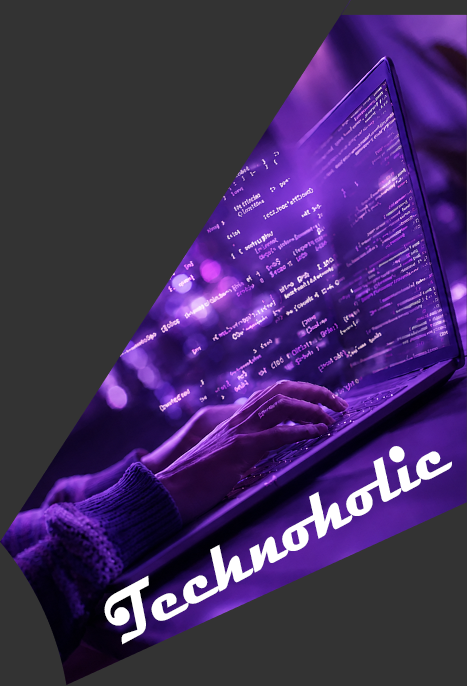
<style>
.page{position:relative;width:467px;height:686px;background:#333333}
.page>*{position:absolute;margin:0}
.t1{font:70.3px "Magneto-Bold";color:#ffffff;scale:0.83 1}
</style>
<div class="page">
<p class="t1" style="left:104px;top:446px;width:348px;height:199px;rotate:-28deg">Technoholic</p>
</div>
